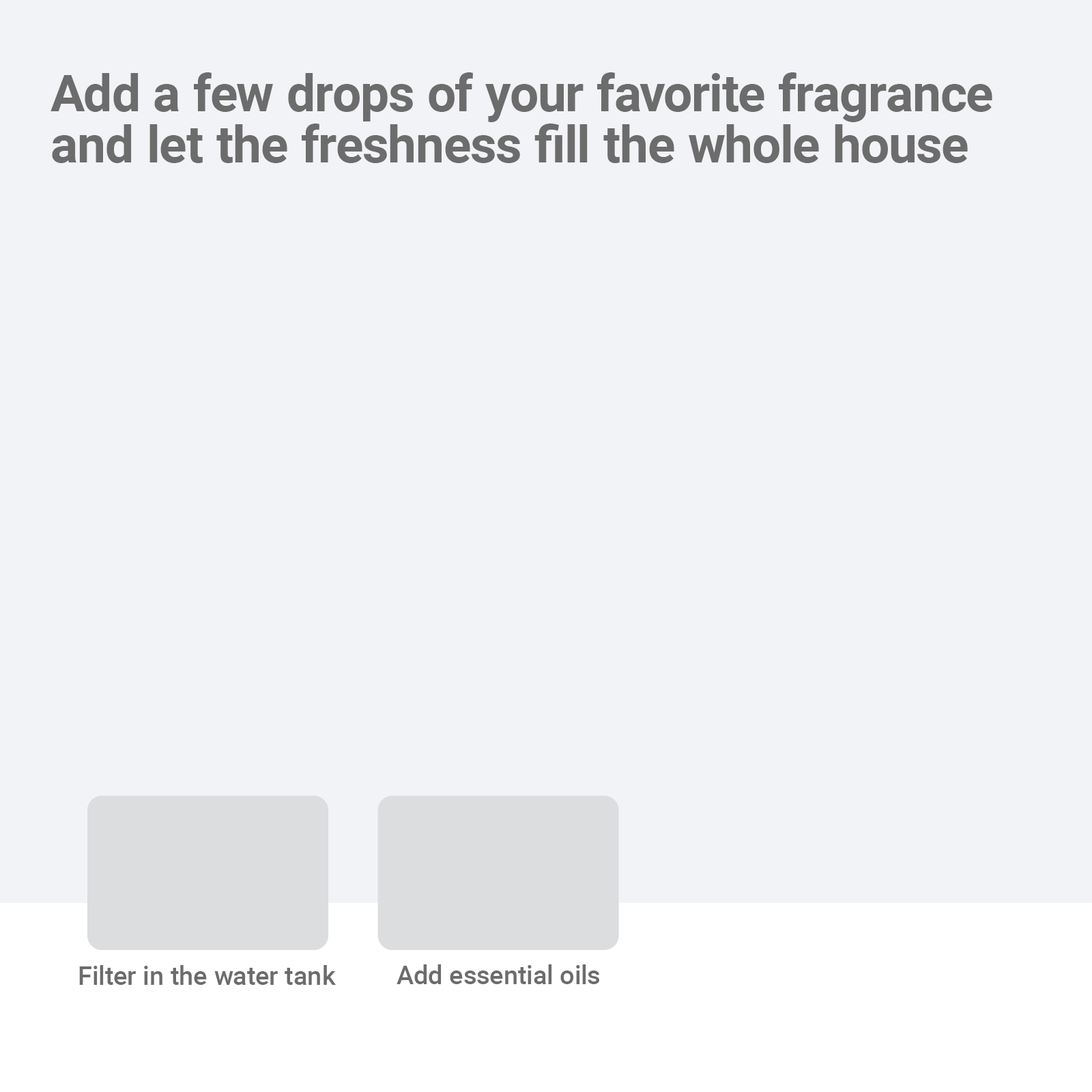
<style>
.page{position:relative;width:1092px;height:1092px;background:#f2f3f6}
.page>*{position:absolute;margin:0}
.t1{font:51px/51px "Roboto-Bold";color:#6c6c6c}
.t2{font:26.2px "Roboto-Medium";color:#6c6c6c}
</style>
<div class="page">
<p class="t1" style="left:51px;top:72px;width:941px;height:91px">Add a few drops of your favorite fragrance<br>and let the freshness fill the whole house</p>
<p class="t2" style="left:79px;top:965px;width:257px;height:20px">Filter in the water tank</p>
<p class="t2" style="left:397px;top:964px;width:202px;height:20px">Add essential oils</p>
</div>
